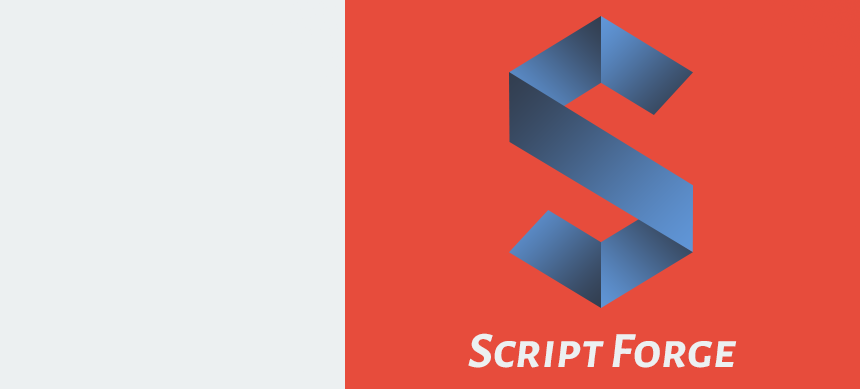
<style>
.page{position:relative;width:860px;height:389px;background:#e74c3c}
.page>*{position:absolute;margin:0}
.t1{font:50.9px "AlegreyaSansSC-BoldItalic";color:#ecf0f1}
</style>
<div class="page">
<p class="t1" style="left:468px;top:333px;width:269px;height:35px">Script Forge</p>
</div>
